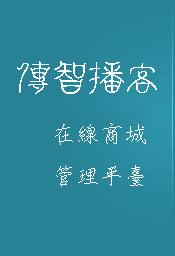
<style>
.page{position:relative;width:175px;height:256px;background:#278296}
.page>*{position:absolute;margin:0}
.t1{font:24px "DFSoZing-W3-WIN-BF";color:#fefefe}
.t2{font:36px "IDDraginZhuan";color:#fefefe}
</style>
<div class="page">
<p class="t1" style="left:17px;top:61px;width:140px;height:126px"><span class="t2">傳智播客<br></span>    在線商城<br>               管  理平臺</p>
</div>
